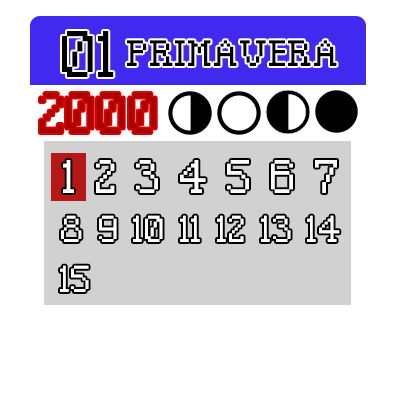
<style>
.page{position:relative;width:400px;height:400px;background:#ffffff}
.page>*{position:absolute;margin:0}
.t1{font:81.8px "Smallif";color:#000000}
.t2{font:51.5px "Smallif";color:#000000}
.t3{font:71.1px "Smallif";color:#a60000}
.t4{font:58.5px "Smallif";color:#ffffff}
.t5{font:46.4px "Smallif";color:#ffffff}
</style>
<div class="page">
<p class="t1" style="left:62px;top:31px;width:52px;height:46px">01</p>
<p class="t2" style="left:127px;top:40px;width:210px;height:26px">PRIMAVERA</p>
<p class="t3" style="left:40px;top:93px;width:116px;height:40px">2000</p>
<p class="t4" style="left:63px;top:160px;width:274px;height:33px">1 2 3 4 5 6 7</p>
<p class="t5" style="left:61px;top:215px;width:279px;height:27px">8 9 10 11 12 13 14</p>
<p class="t5" style="left:60px;top:265px;width:29px;height:27px">15</p>
</div>
